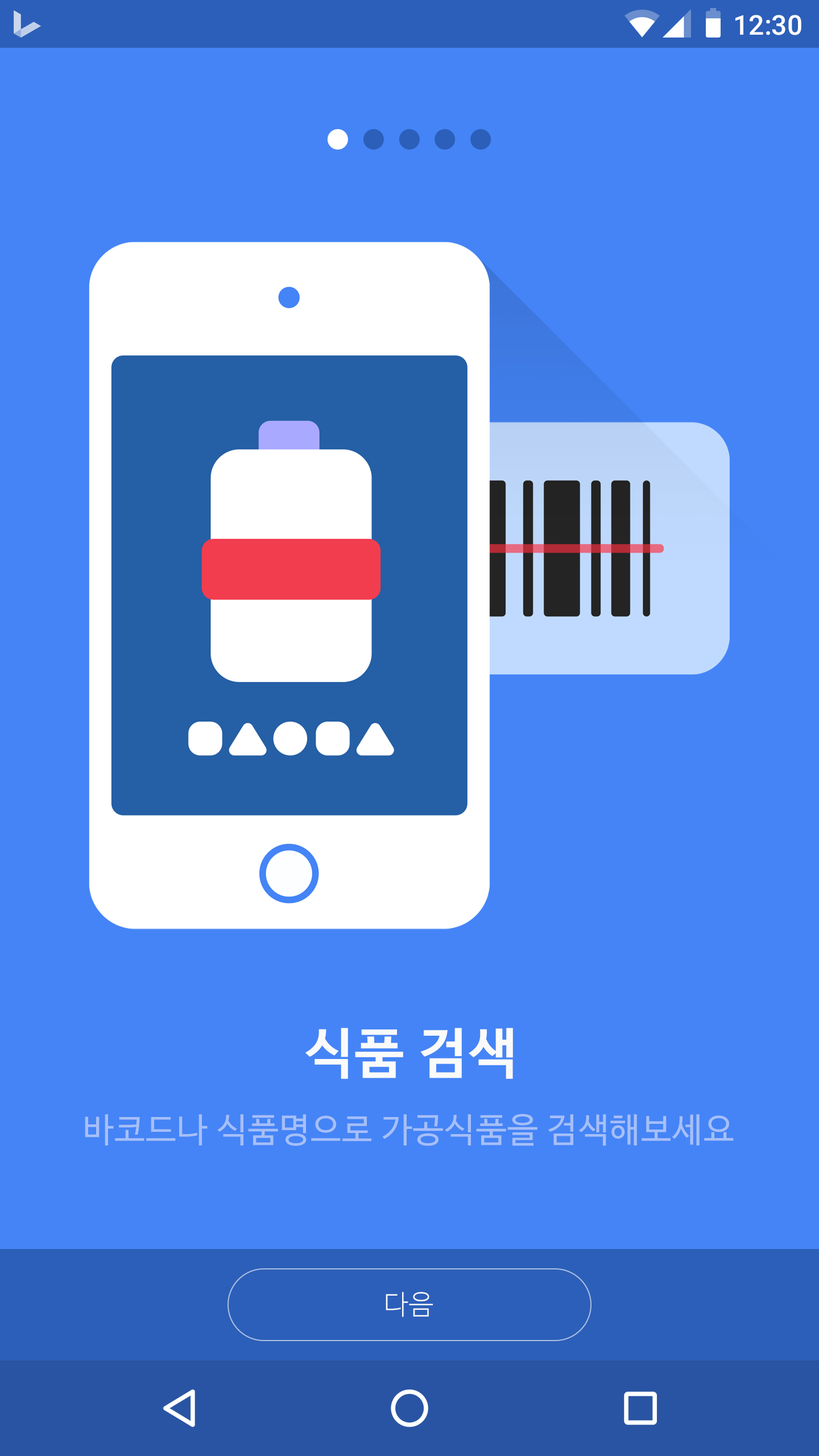
<style>
.page{position:relative;width:819px;height:1456px;background:#4484f6}
.page>*{position:absolute;margin:0}
.t1{font:27.3px "Roboto-Medium";color:#ffffff}
.t2{font:54.6px "NanumBarunGothicBold";letter-spacing:0.025em;color:#fafafa}
.t3{font:34.1px "NanumBarunGothic";letter-spacing:0.025em;color:#a6bff8}
.t4{font:27.3px "NanumBarunGothicLight";letter-spacing:0.025em;color:#fafafa}
</style>
<div class="page">
<p class="t1" style="left:735px;top:15px;width:66px;height:20px">12:30</p>
<p class="t2" style="left:305px;top:1028px;width:208px;height:51px">식품 검색</p>
<p class="t3" style="left:85px;top:1114px;width:649px;height:32px">바코드나 식품명으로 가공식품을 검색해보세요</p>
<p class="t4" style="left:386px;top:1292px;width:47px;height:25px">다음</p>
</div>
